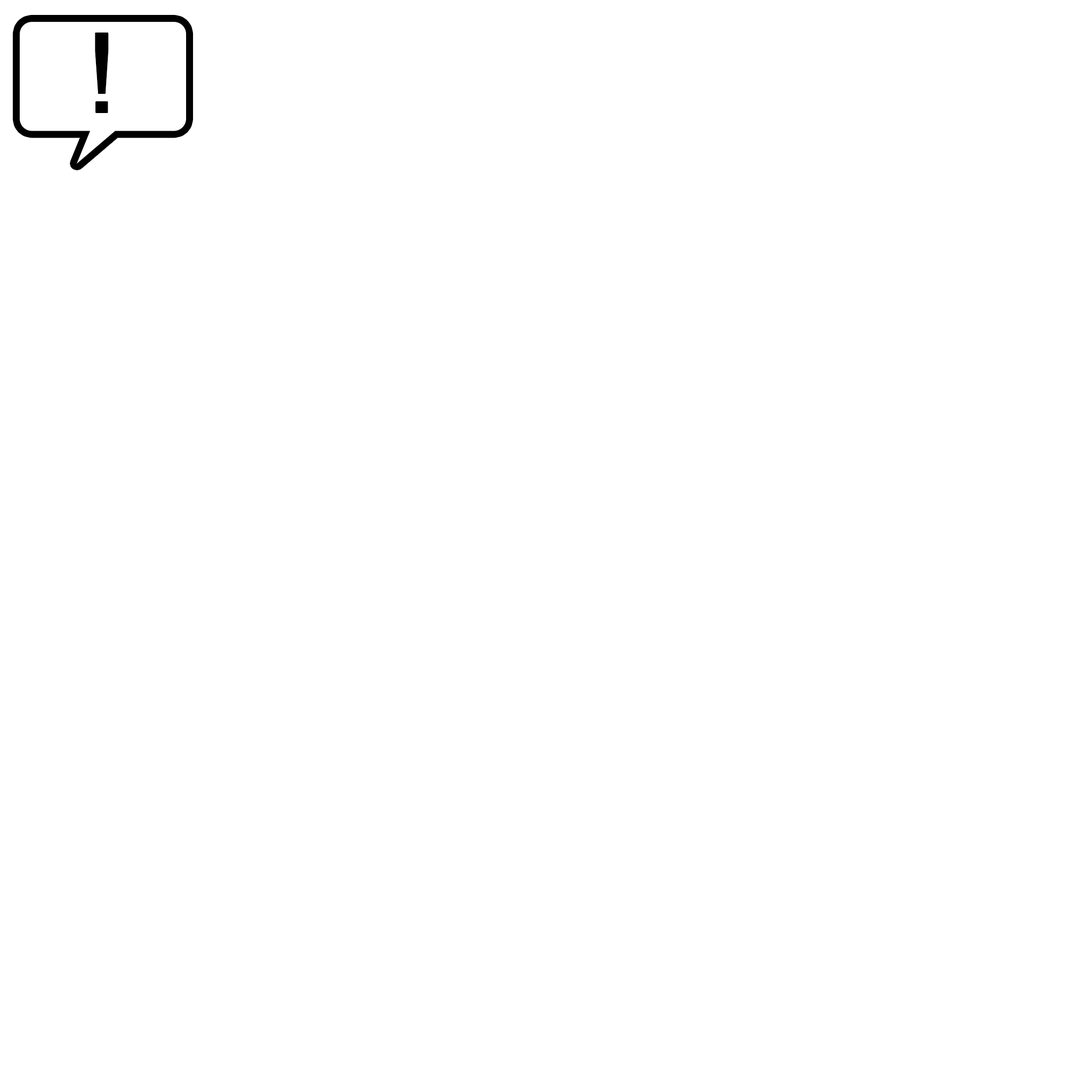
<style>
.page{position:relative;width:1092px;height:1092px;background:#ffffff}
.page>*{position:absolute;margin:0}
.t1{font:110.9px "ArialMT";color:#000000;font-weight:bold}
</style>
<div class="page">
<p class="t1" style="left:95px;top:33px;width:14px;height:80px">!</p>
</div>
